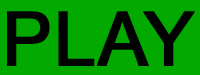
<style>
.page{position:relative;width:200px;height:75px;background:#02aa00}
.page>*{position:absolute;margin:0}
.t1{font:75px "ArialMT";color:#000000;font-weight:bold}
</style>
<div class="page">
<p class="t1" style="left:7px;top:11px;width:188px;height:55px">PLAY</p>
</div>
